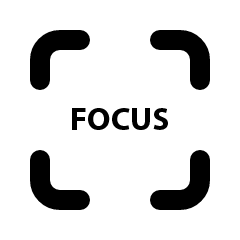
<style>
.page{position:relative;width:240px;height:240px;background:#ffffff}
.page>*{position:absolute;margin:0}
.t1{font:32.6px "MyriadPro-Bold";color:#000000}
</style>
<div class="page">
<p class="t1" style="left:72px;top:108px;width:96px;height:22px">FOCUS</p>
</div>
